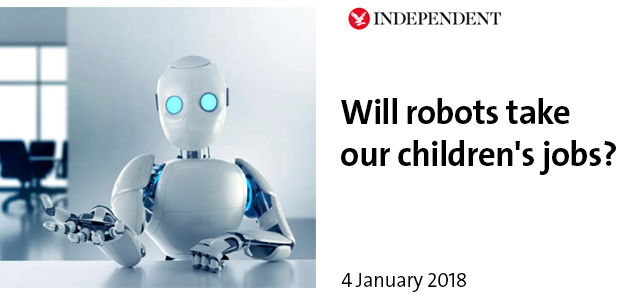
<style>
.page{position:relative;width:633px;height:300px;background:#ffffff}
.page>*{position:absolute;margin:0}
.t1{font:35px "V&ATheSansC6s-Bold";letter-spacing:-0.02em;color:#000000}
.t2{font:20.8px "V&ATheSansC6s-SemiLight";letter-spacing:-0.02em;color:#000000}
</style>
<div class="page">
<p class="t1" style="left:341px;top:98px;width:275px;height:77px">Will robots take<br>our children's jobs?</p>
<p class="t2" style="left:341px;top:273px;width:125px;height:19px">4 January 2018</p>
</div>
